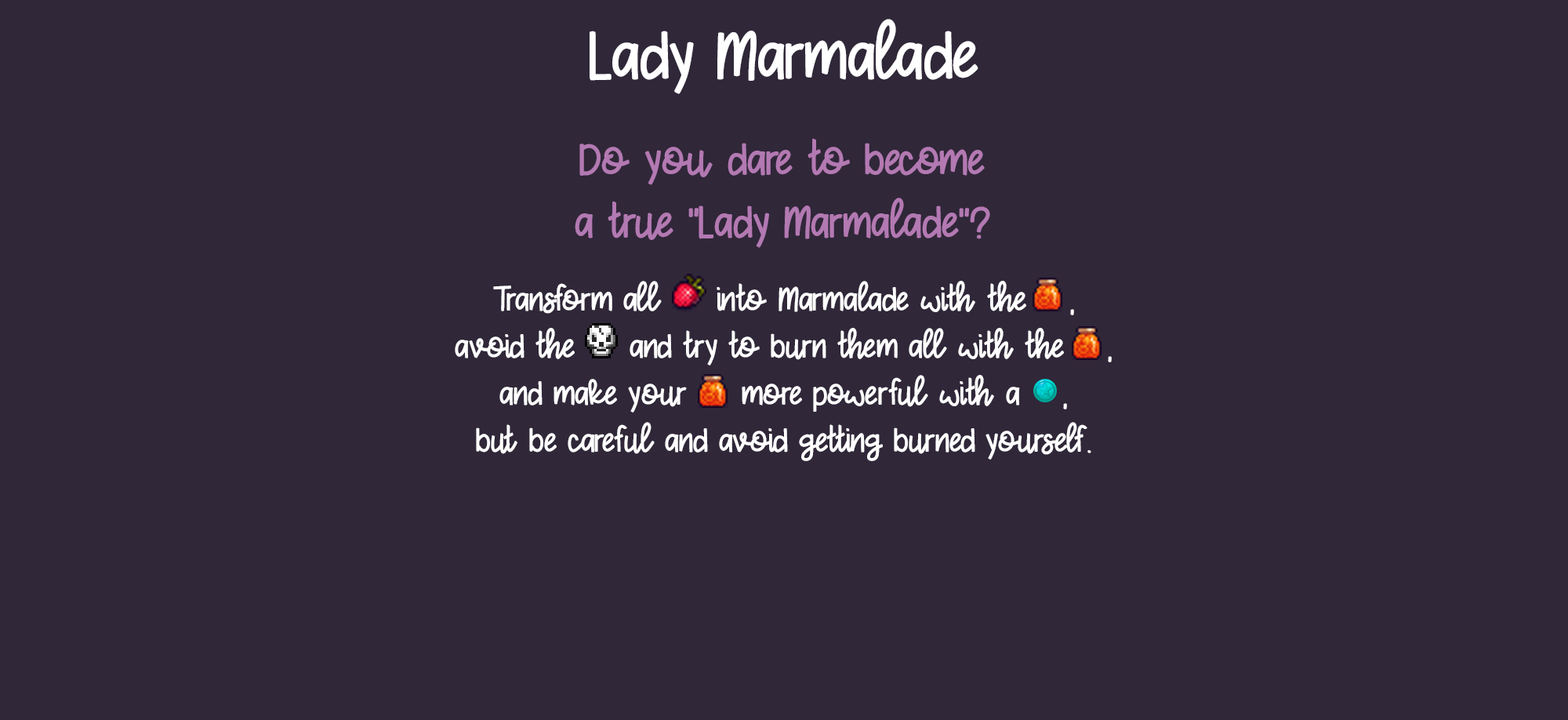
<style>
.page{position:relative;width:1568px;height:720px;background:#302739}
.page>*{position:absolute;margin:0}
.t1{font:56.4px "XOXOGlow-Regular";color:#ffffff}
.t2{font:37.6px/62.7px "XOXOGlow-Regular";color:#b379b2}
.t3{font:28.2px/47px "XOXOGlow-Regular";color:#ffffff}
</style>
<div class="page">
<p class="t1" style="left:590px;top:19px;width:388px;height:75px">Lady Marmalade</p>
<p class="t2" style="left:575px;top:138px;width:415px;height:110px;text-align:center">Do you dare to become<br>a true "Lady Marmalade"?</p>
<p class="t3" style="left:455px;top:281px;width:657px;height:180px;text-align:center">Transform all     into Marmalade with the    ,<br>avoid the     and try to burn them all with the    ,<br>and make your     more powerful with a    ,<br>but be careful and avoid getting burned yourself.</p>
</div>
